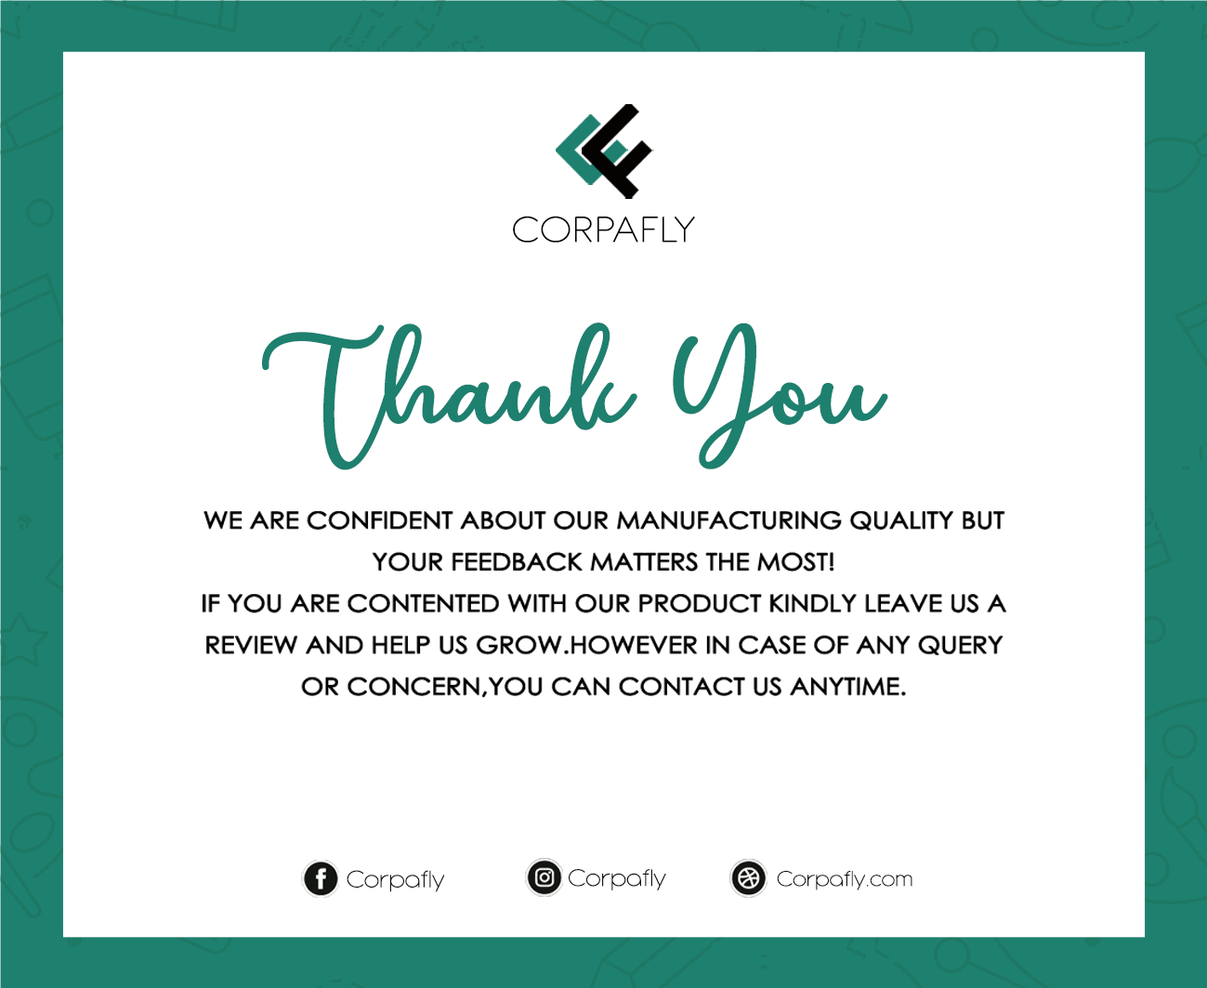
<style>
.page{position:relative;width:1207px;height:988px;background:#ffffff}
.page>*{position:absolute;margin:0}
.t1{font:38.1px "AntipastoPro-Hairline";letter-spacing:0.04em;color:#000000;font-weight:bold;scale:1.11 1}
.t2{font:144.1px "Chiesty";letter-spacing:-0.02em;color:#1e806f;font-weight:bold;scale:1.11 1}
.t3{font:23.4px/41.5px "CenturyGothic";letter-spacing:-0.02em;color:#000000;text-transform:uppercase;font-weight:bold;scale:1.11 1}
.t4{font:25.1px "AntipastoPro-Hairline";color:#141613;font-weight:bold;scale:1.11 1}
.t5{font:22.6px "AntipastoPro-Hairline";color:#141613;font-weight:bold;scale:1.11 1}
</style>
<div class="page">
<p class="t1" style="left:513px;top:216px;width:182px;height:27px">CORPAFLY</p>
<p class="t2" style="left:262px;top:322px;width:626px;height:148px">Thank You</p>
<p class="t3" style="left:203px;top:511px;width:804px;height:187px;text-align:center">We are confident about our manufacturing quality but<br>your feedback matters the most!<br>If you are contented with our product kindly leave us a<br>review and help us grow.However in case of any query<br>or concern,you can contact us anytime.</p>
<p class="t4" style="left:347px;top:870px;width:98px;height:22px">Corpafly</p>
<p class="t4" style="left:569px;top:869px;width:97px;height:21px">Corpafly</p>
<p class="t5" style="left:777px;top:870px;width:136px;height:20px">Corpafly.com</p>
</div>
